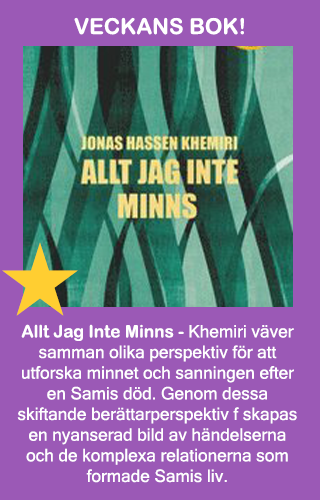
<style>
.page{position:relative;width:320px;height:500px;background:#9b59b6}
.page>*{position:absolute;margin:0}
.t1{font:22px "ArialRoundedMTBold";color:#ffffff}
.t2{font:17.2px "MicrosoftSansSerif"}
.t3{font:24.5px "ArialRoundedMTBold"}
.t4{font:17.2px "ArialRoundedMTBold"}
</style>
<div class="page">
<p class="t1" style="left:74px;top:17px;width:170px;height:18px">VECKANS BOK!</p>
<p class="t2" style="left:15px;top:40px;width:285px;height:443px;text-align:center"><span class="t3">Lorem ipsum dolor sit amet, consectetur adipiscing elit, sed do eiusmod tempor incididunt ut labore et dolore magna aliqua. Quis ipsum suspendisse ultrices gravida. Risus commodo viverra <br><br></span><span class="t4">Allt Jag Inte Minns - </span>Khemiri väver samman olika perspektiv för att utforska minnet och sanningen efter en Samis död. Genom dessa skiftande berättarperspektiv f skapas en nyanserad bild av händelserna och de komplexa relationerna som formade Samis liv.</p>
</div>
